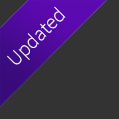
<style>
.page{position:relative;width:119px;height:119px;background:#333333}
.page>*{position:absolute;margin:0}
.t1{font:20.5px "SourceSansPro-Light";color:#ffffff}
</style>
<div class="page">
<p class="t1" style="left:7px;top:6px;width:59px;height:59px;rotate:-45deg">Updated</p>
</div>
